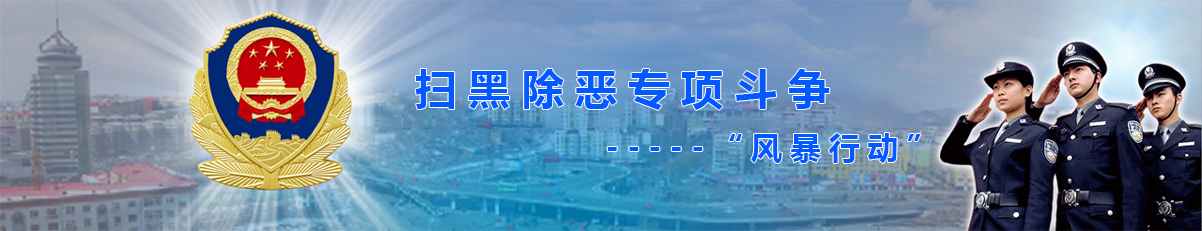
<style>
.page{position:relative;width:1202px;height:231px}
.page>*{position:absolute;margin:0}
.t1{font:42.3px "MicrosoftYaHei-Bold";letter-spacing:0.26em;color:#0159ff;text-transform:uppercase}
.t2{font:30.7px "MicrosoftYaHei-Bold";letter-spacing:0.26em;color:#0159ff;text-transform:uppercase}
</style>
<div class="page">
<p class="t1" style="left:415px;top:69px;width:415px;height:41px">扫黑除恶专项斗争</p>
<p class="t2" style="left:607px;top:133px;width:314px;height:30px">-----“风暴行动”</p>
</div>
